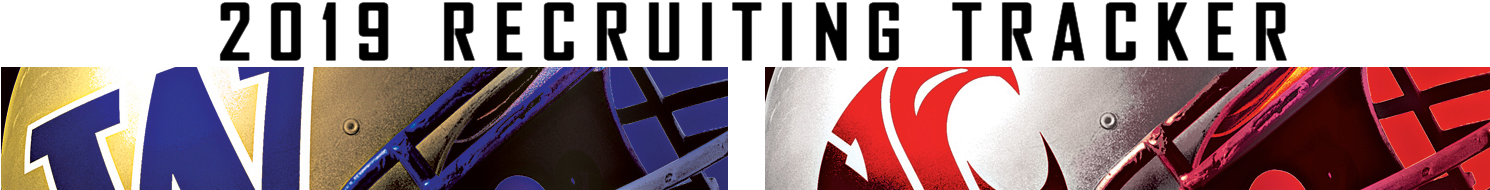
<style>
.page{position:relative;width:1490px;height:190px;background:#ffffff}
.page>*{position:absolute;margin:0}
.t1{font:76px "AgencyFB-Bold";letter-spacing:0.2em;color:#000000;font-weight:bold}
</style>
<div class="page">
<p class="t1" style="left:219px;top:2px;width:1069px;height:59px">2019 RECRUITING TRACKER</p>
</div>
